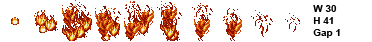
<style>
.page{position:relative;width:372px;height:42px;background:#ffffff}
.page>*{position:absolute;margin:0}
.t1{font:10px "Arial-BoldMT";color:#000000}
</style>
<div class="page">
<p class="t1" style="left:313px;top:5px;width:27px;height:33px">W 30<br>H 41<br>Gap 1</p>
</div>
